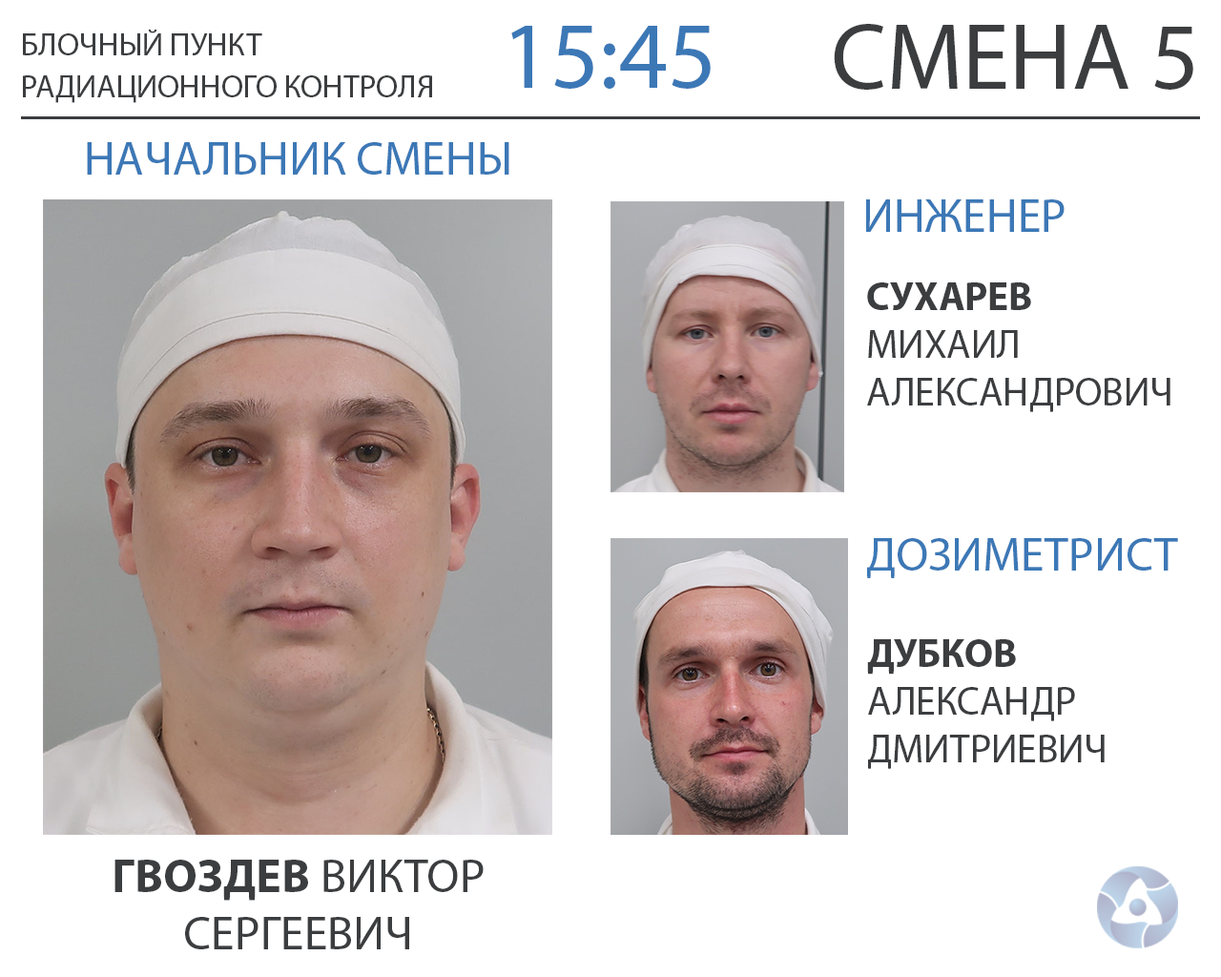
<style>
.page{position:relative;width:1221px;height:977px;background:#ffffff}
.page>*{position:absolute;margin:0}
.t1{font:31.8px "MyriadPro-Regular";color:#3b3d3f}
.t2{font:95.4px "MyriadPro-Regular";color:#3c78b6}
.t3{font:95.4px "MyriadPro-Regular";color:#3b3d3f}
.t4{font:47.7px "MyriadPro-Regular";color:#3c78b6}
.t5{font:39.7px "MyriadPro-Regular";color:#3b3d3f}
.t6{font:39.7px "MyriadPro-Bold";color:#3b3d3f}
.t7{font:47.7px "MyriadPro-Regular";color:#3b3d3f}
.t8{font:47.7px "MyriadPro-Bold";color:#3b3d3f}
</style>
<div class="page">
<p class="t1" style="left:23px;top:30px;width:239px;height:25px">БЛОЧНЫЙ ПУНКТ</p>
<p class="t2" style="left:511px;top:26px;width:200px;height:63px">15:45</p>
<p class="t3" style="left:834px;top:24px;width:359px;height:66px">СМЕНА 5</p>
<p class="t1" style="left:23px;top:75px;width:409px;height:28px">РАДИАЦИОННОГО КОНТРОЛЯ</p>
<p class="t4" style="left:87px;top:142px;width:422px;height:33px">НАЧАЛЬНИК СМЕНЫ</p>
<p class="t4" style="left:866px;top:199px;width:198px;height:33px">ИНЖЕНЕР</p>
<p class="t5" style="left:867px;top:282px;width:303px;height:130px"><span class="t6">СУХАРЕВ<br></span>МИХАИЛ<br>АЛЕКСАНДРОВИЧ</p>
<p class="t4" style="left:867px;top:538px;width:311px;height:40px">ДОЗИМЕТРИСТ</p>
<p class="t5" style="left:867px;top:639px;width:238px;height:130px"><span class="t6">ДУБКОВ<br></span>АЛЕКСАНДР<br>ДМИТРИЕВИЧ</p>
<p class="t7" style="left:114px;top:859px;width:370px;height:90px;text-align:center"><span class="t8">ГВОЗДЕВ</span> ВИКТОР<br>СЕРГЕЕВИЧ</p>
</div>
